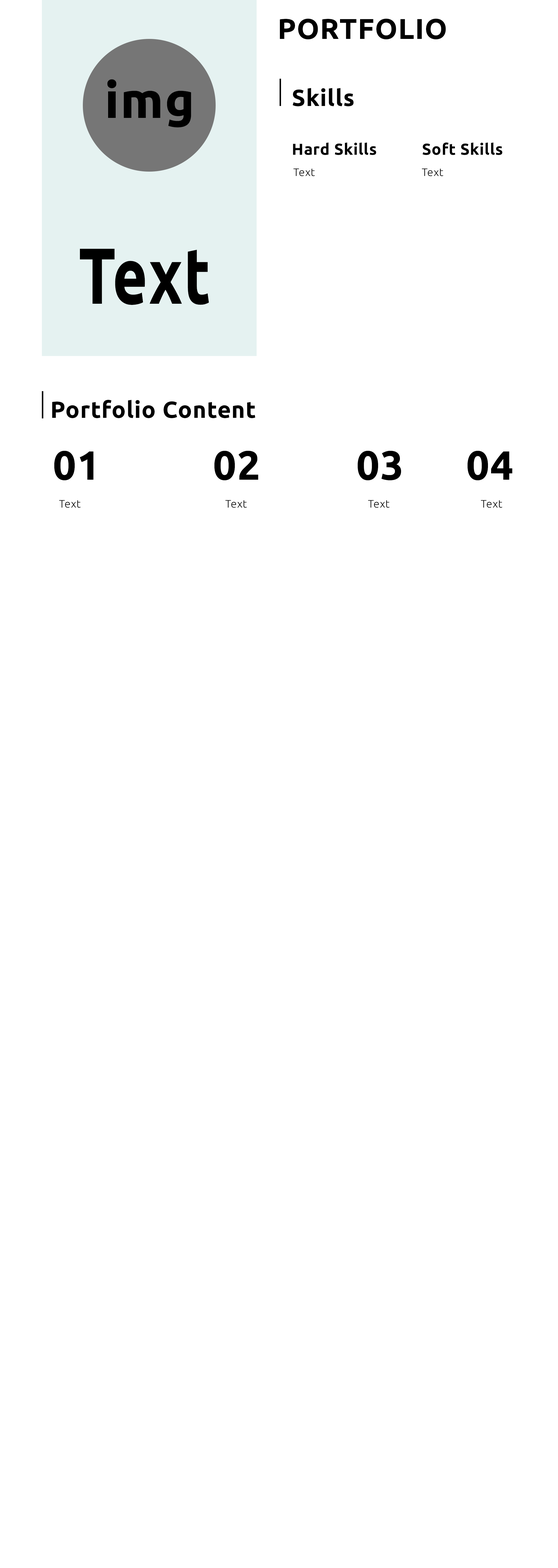
<style>
.page{position:relative;width:558px;height:1568px;background:#ffffff}
.page>*{position:absolute;margin:0}
.t1{font:28.6px "Ubuntu-Bold";letter-spacing:0.025em;color:#000000}
.t2{font:50.3px "Ubuntu-Bold";letter-spacing:0.025em;color:#000000}
.t3{font:23.2px "Ubuntu-Bold";letter-spacing:0.025em;color:#000000}
.t4{font:15.8px "Ubuntu-Bold";letter-spacing:0.025em;color:#000000}
.t5{font:10.8px "Ubuntu-Light";letter-spacing:0.025em;color:#000000}
.t6{font:79.2px "Ubuntu-Bold";letter-spacing:0.025em;color:#000000;scale:0.76 1}
.t7{font:40.8px "Ubuntu-Bold";letter-spacing:0.025em;color:#000000}
</style>
<div class="page">
<p class="t1" style="left:280px;top:19px;width:165px;height:20px">PORTFOLIO</p>
<p class="t2" style="left:107px;top:79px;width:84px;height:48px">img</p>
<p class="t3" style="left:292px;top:88px;width:61px;height:18px">Skills</p>
<p class="t4" style="left:293px;top:142px;width:83px;height:13px">Hard Skills</p>
<p class="t4" style="left:422px;top:142px;width:80px;height:13px">Soft Skills</p>
<p class="t5" style="left:293px;top:168px;width:21px;height:8px">Text</p>
<p class="t5" style="left:421px;top:168px;width:22px;height:8px">Text</p>
<p class="t6" style="left:80px;top:249px;width:129px;height:56px">Text</p>
<p class="t3" style="left:52px;top:400px;width:203px;height:18px">Portfolio Content</p>
<p class="t7" style="left:54px;top:451px;width:39px;height:29px">01</p>
<p class="t7" style="left:214px;top:451px;width:44px;height:29px">02</p>
<p class="t7" style="left:357px;top:451px;width:44px;height:29px">03</p>
<p class="t7" style="left:467px;top:451px;width:45px;height:29px">04</p>
<p class="t5" style="left:59px;top:500px;width:21px;height:8px">Text</p>
<p class="t5" style="left:225px;top:500px;width:22px;height:8px">Text</p>
<p class="t5" style="left:368px;top:500px;width:21px;height:8px">Text</p>
<p class="t5" style="left:480px;top:500px;width:22px;height:8px">Text</p>
</div>
